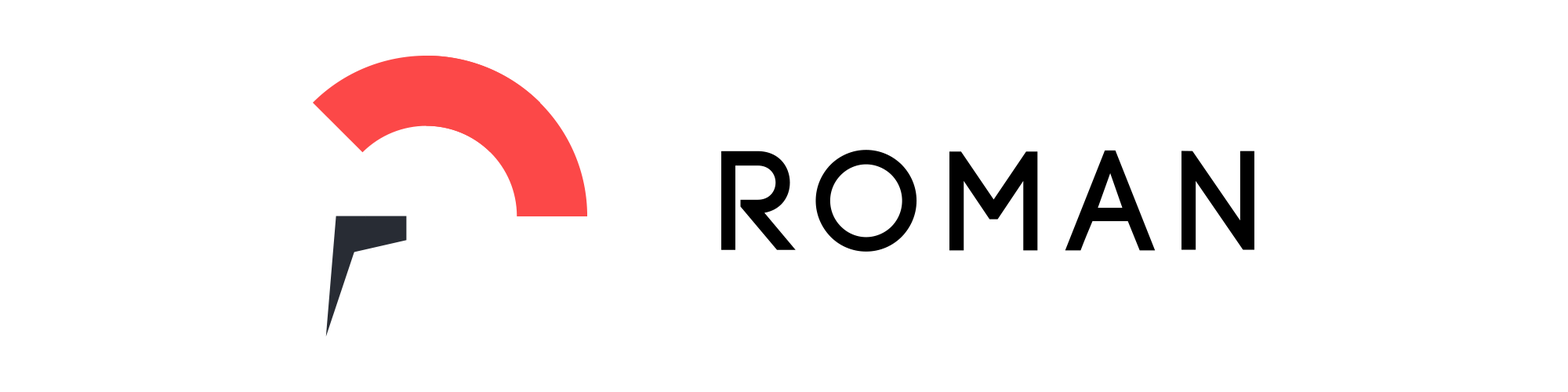
<style>
.page{position:relative;width:1568px;height:392px;background:#ffffff}
.page>*{position:absolute;margin:0}
.t1{font:141.1px "Code-Bold";letter-spacing:0.16em;color:#000000}
</style>
<div class="page">
<p class="t1" style="left:721px;top:150px;width:533px;height:102px">Roman</p>
</div>
